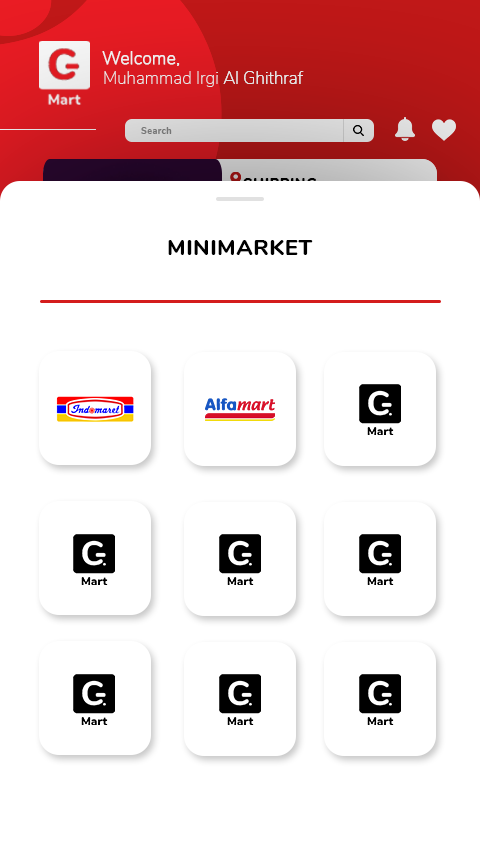
<style>
.page{position:relative;width:480px;height:854px;background:#ffffff}
.page>*{position:absolute;margin:0}
.t1{font:16.9px "Nunito-ExtraLight";letter-spacing:0.005em;color:#ffffff;font-weight:bold}
.t2{font:16.9px "Nunito-ExtraLight";letter-spacing:0.005em;color:#e7e7e7}
.t3{font:9.5px "Nunito-ExtraBold";letter-spacing:0.01em;color:#767676}
.t4{font:22.5px "Nunito-ExtraBold";letter-spacing:0.01em;color:#000000}
</style>
<div class="page">
<p class="t1" style="left:102px;top:51px;width:78px;height:15px">Welcome,</p>
<p class="t1" style="left:102px;top:51px;width:78px;height:15px">Welcome,</p>
<p class="t2" style="left:104px;top:71px;width:200px;height:16px">Muhammad Irgi Al Ghithraf</p>
<p class="t2" style="left:104px;top:71px;width:200px;height:16px">Muhammad Irgi Al Ghithraf</p>
<p class="t3" style="left:141px;top:127px;width:31px;height:7px">Search</p>
<p class="t3" style="left:141px;top:127px;width:31px;height:7px">Search</p>
<p class="t4" style="left:168px;top:240px;width:145px;height:15px">MINIMARKET</p>
</div>
